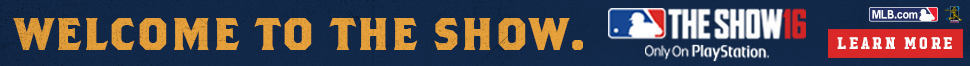
<style>
.page{position:relative;width:970px;height:66px}
.page>*{position:absolute;margin:0}
.t1{font:46.3px "BrothersBold";letter-spacing:0.04em;color:#e29e3a}
.t2{font:16.8px "HudsonNY-Slab";letter-spacing:0.15em;color:#ffffff}
</style>
<div class="page">
<p class="t1" style="left:13px;top:18px;width:570px;height:32px">WELCOME TO THE SHOW.</p>
<p class="t2" style="left:837px;top:37px;width:115px;height:12px">LEARN MORE</p>
</div>
